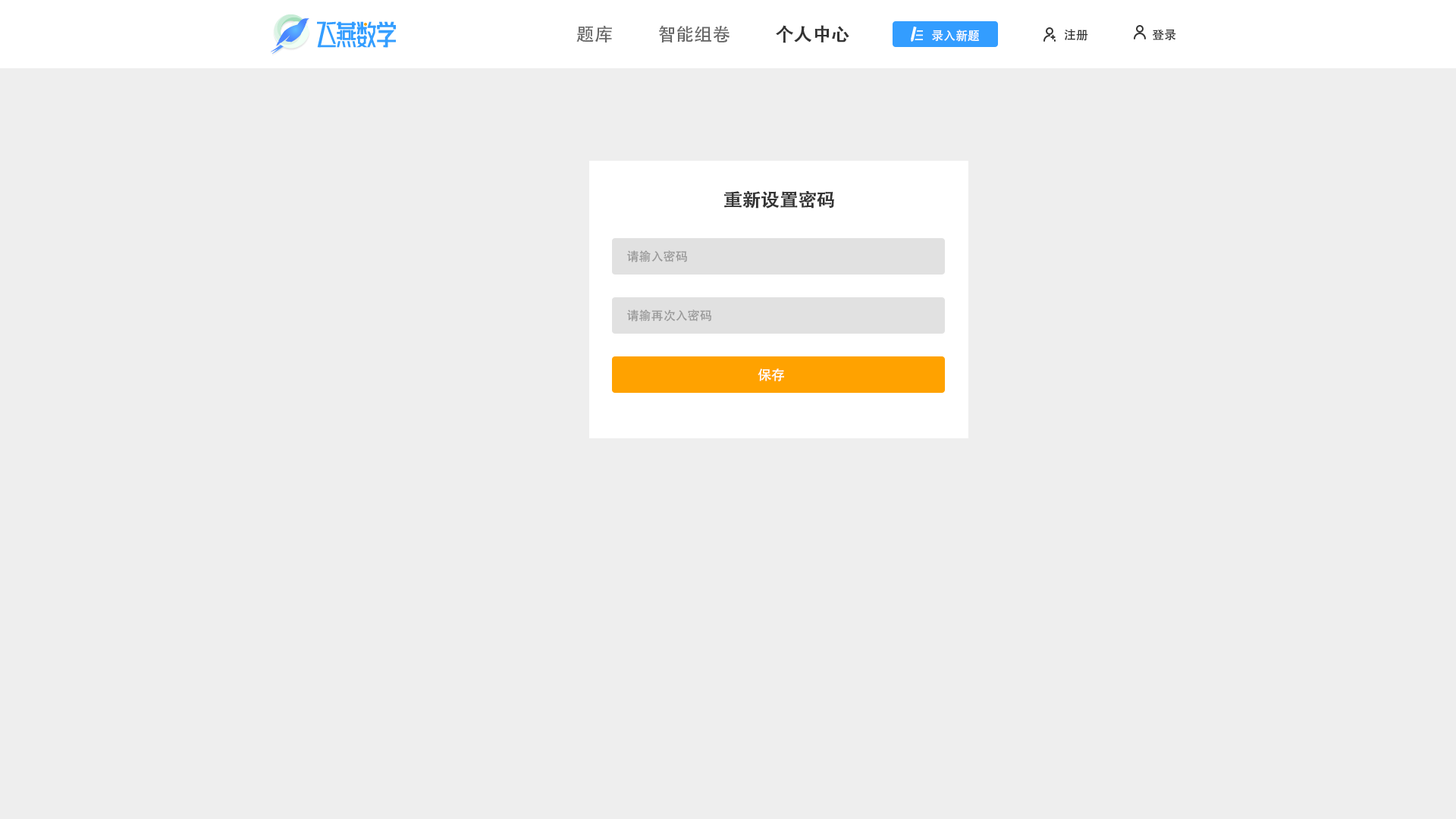
<style>
.page{position:relative;width:1456px;height:819px;background:#eeeeee}
.page>*{position:absolute;margin:0}
.t1{font:18.2px "AdobeHeitiStd-Regular";color:#666666}
.t2{font:18.2px "AdobeHeitiStd-Regular";color:#333333;font-weight:bold}
.t3{font:12.1px "AdobeHeitiStd-Regular";color:#ffffff}
.t4{font:12.1px "AdobeHeitiStd-Regular";color:#333333}
.t5{font:12.1px "AdobeHeitiStd-Regular";color:#999999}
.t6{font:13.6px "AdobeHeitiStd-Regular";color:#ffffff}
</style>
<div class="page">
<p class="t1" style="left:576px;top:26px;width:36px;height:16px">题库</p>
<p class="t1" style="left:659px;top:25px;width:71px;height:17px">智能组卷</p>
<p class="t2" style="left:776px;top:25px;width:73px;height:18px">个人中心</p>
<p class="t3" style="left:932px;top:30px;width:47px;height:12px">录入新题</p>
<p class="t4" style="left:1064px;top:29px;width:24px;height:12px">注册</p>
<p class="t4" style="left:1152px;top:29px;width:24px;height:12px">登录</p>
<p class="t2" style="left:724px;top:191px;width:110px;height:18px">重新设置密码</p>
<p class="t5" style="left:627px;top:250px;width:60px;height:12px">请输入密码</p>
<p class="t5" style="left:627px;top:309px;width:84px;height:13px">请输再次入密码</p>
<p class="t6" style="left:758px;top:369px;width:26px;height:12px">保存</p>
</div>
